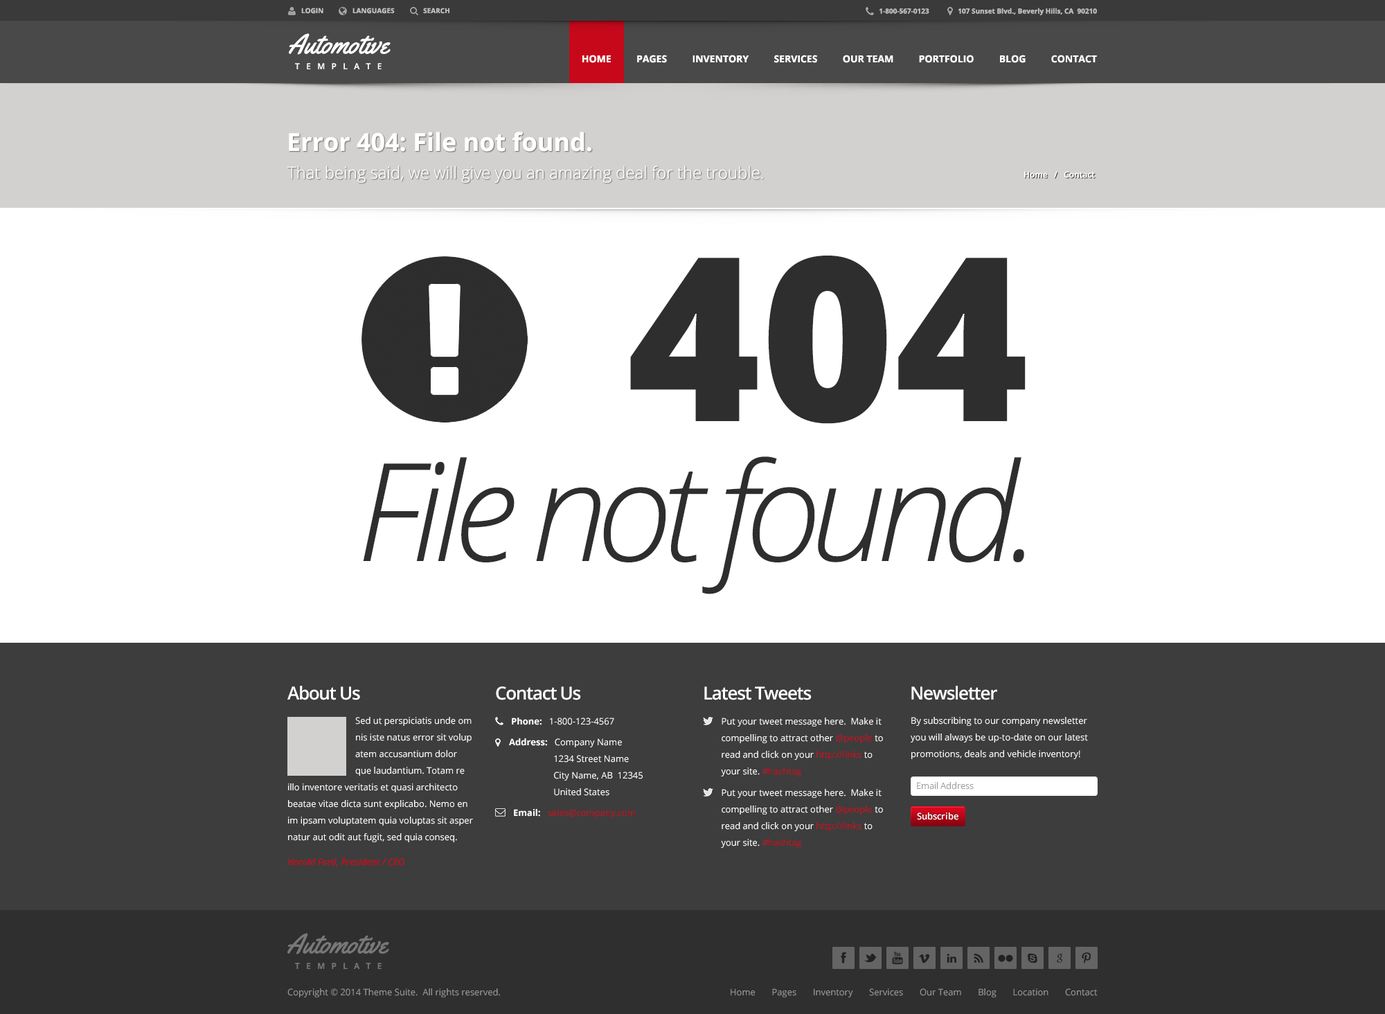
<style>
.page{position:relative;width:1385px;height:1014px;background:#ffffff}
.page>*{position:absolute;margin:0}
.t1{font:6.9px "OpenSans-Bold";color:#c0c0c0}
.t2{font:27.7px "Yellowtail";color:#ffffff}
.t3{font:9.7px "OpenSans-Bold";color:#ffffff}
.t4{font:24.9px "OpenSans-Bold";color:#ffffff}
.t5{font:16.6px "OpenSans-Light";color:#ffffff}
.t6{font:8.3px "OpenSans-Semibold";color:#ffffff}
.t7{font:228.5px "OpenSans-Extrabold";color:#2e2e2e}
.t8{font:136.4px "OpenSansLight-Italic";letter-spacing:-0.075em;color:#2e2e2e}
.t9{font:18px "OpenSans-Semibold";letter-spacing:-0.05em;color:#ffffff}
.t10{font:9px/16.6px "OpenSans";color:#ffffff}
.t11{font:9px "OpenSans";color:#ffffff}
.t12{font:9px "OpenSans-Bold";color:#ffffff}
.t13{font:9px/16.6px "OpenSans";color:#c7081b}
.t14{font:9px/13.8px "OpenSans-Bold";color:#ffffff}
.t15{font:9px/24.9px "OpenSans-SemiboldItalic";color:#c7081b}
.t16{font:9px "OpenSans";color:#999999}
.t17{font:9px "OpenSans";color:#c7081b}
.t18{font:9px "OpenSans-Semibold";color:#ffffff}
.t19{font:27.7px "Yellowtail";color:#787878}
.t20{font:8.3px "OpenSans-Semibold";color:#787878}
</style>
<div class="page">
<p class="t1" style="left:301px;top:8px;width:148px;height:6px">LOGIN                LANGUAGES                SEARCH</p>
<p class="t1" style="left:879px;top:8px;width:218px;height:7px">1-800-567-0123                107 Sunset Blvd., Beverly Hills, CA  90210</p>
<p class="t2" style="left:289px;top:33px;width:101px;height:22px">Automotive</p>
<p class="t3" style="left:582px;top:55px;width:515px;height:8px">HOME          PAGES          INVENTORY          SERVICES          OUR TEAM          PORTFOLIO          BLOG          CONTACT</p>
<p class="t4" style="left:289px;top:132px;width:303px;height:20px">Error 404: File not found.</p>
<p class="t5" style="left:287px;top:165px;width:476px;height:18px">That being said, we will give you an amazing deal for the trouble.</p>
<p class="t6" style="left:1024px;top:171px;width:71px;height:7px">Home   /   Contact</p>
<p class="t7" style="left:630px;top:255px;width:395px;height:169px">404</p>
<p class="t8" style="left:363px;top:456px;width:661px;height:138px">File not found.</p>
<p class="t9" style="left:287px;top:685px;width:73px;height:15px">About Us</p>
<p class="t9" style="left:496px;top:686px;width:85px;height:14px">Contact Us</p>
<p class="t9" style="left:704px;top:686px;width:107px;height:14px">Latest Tweets</p>
<p class="t9" style="left:911px;top:685px;width:86px;height:15px">Newsletter</p>
<p class="t10" style="left:355px;top:717px;width:116px;height:58px">Sed ut perspiciatis unde om<br>nis iste natus error sit volup<br>atem accusantium dolor<br>que laudantium. Totam re</p>
<p class="t11" style="left:512px;top:717px;width:102px;height:8px"><span class="t12">Phone:   </span>1-800-123-4567</p>
<p class="t10" style="left:721px;top:717px;width:162px;height:59px">Put your tweet message here.  Make it <br>compelling to attract other <span class="t13">@people </span>to <br>read and click on your <span class="t13">http://links </span>to <br>your site. <span class="t13">#hashtag</span></p>
<p class="t10" style="left:910px;top:717px;width:178px;height:42px">By subscribing to our company newsletter<br>you will always be up-to-date on our latest<br>promotions, deals and vehicle inventory!</p>
<p class="t10" style="left:509px;top:738px;width:133px;height:57px"><span class="t14">Address:   </span>Company Name<br>                   1234 Street Name<br>                   City Name, AB  12345<br>                   United States</p>
<p class="t10" style="left:287px;top:783px;width:186px;height:83px">illo inventore veritatis et quasi architecto <br>beatae vitae dicta sunt explicabo. Nemo en<br>im ipsam voluptatem quia voluptas sit asper<br>natur aut odit aut fugit, sed quia conseq.<br><span class="t15">Harold Ford, President / CEO</span></p>
<p class="t16" style="left:917px;top:782px;width:56px;height:7px">Email Address</p>
<p class="t10" style="left:721px;top:789px;width:162px;height:58px">Put your tweet message here.  Make it <br>compelling to attract other <span class="t13">@people </span>to <br>read and click on your <span class="t13">http://links </span>to <br>your site. <span class="t13">#hashtag</span></p>
<p class="t17" style="left:514px;top:809px;width:121px;height:9px"><span class="t12">Email:   </span>sales@company.com</p>
<p class="t18" style="left:917px;top:812px;width:41px;height:8px">Subscribe</p>
<p class="t19" style="left:287px;top:933px;width:102px;height:21px">Automotive</p>
<p class="t20" style="left:295px;top:962px;width:86px;height:7px">T   E   M   P   L   A   T   E</p>
<p class="t16" style="left:287px;top:988px;width:213px;height:9px">Copyright © 2014 Theme Suite.  All rights reserved.</p>
<p class="t16" style="left:730px;top:988px;width:367px;height:9px">Home       Pages       Inventory       Services       Our Team       Blog       Location       Contact</p>
</div>
